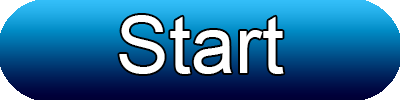
<style>
.page{position:relative;width:400px;height:100px}
.page>*{position:absolute;margin:0}
.t1{font:79.5px "ArialMT";color:#ffffff}
</style>
<div class="page">
<p class="t1" style="left:119px;top:15px;width:165px;height:59px">Start</p>
</div>
